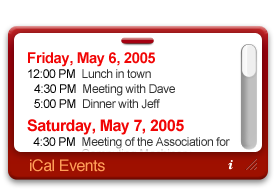
<style>
.page{position:relative;width:277px;height:190px;background:#ffffff}
.page>*{position:absolute;margin:0}
.t1{font:12px/12px "ArialMT";letter-spacing:-0.029em;color:#333333}
.t2{font:15px/15px "Arial-BoldMT";letter-spacing:-0.029em;color:#f10505}
.t3{font:12px/15px "ArialMT";letter-spacing:-0.029em;color:#000000}
.t4{font:12px/15px "ArialMT";letter-spacing:-0.029em;color:#333333}
.t5{font:16px/15px "Arial-BoldMT";letter-spacing:-0.029em;color:#f10505}
.t6{font:12px/12px "ArialMT";letter-spacing:-0.029em;color:#000000}
.t7{font:16px "Helvetica";letter-spacing:-0.029em;color:#ff9e58}
</style>
<div class="page">
<p class="t1" style="left:27px;top:52px;width:203px;height:109px"><span class="t2">Friday, May 6, 2005<br></span><span class="t3">12:00 PM  </span><span class="t4">Lunch in town<br></span><span class="t3">4:30 PM  </span><span class="t4">Meeting with Dave<br></span><span class="t3">5:00 PM  </span><span class="t4">Dinner with Jeff<br></span><span class="t5">Saturday, May 7, 2005<br></span><span class="t3">4:3</span><span class="t6">0 PM  </span>Meeting of the Association for <br>                  Computing Machinery</p>
<p class="t7" style="left:30px;top:159px;width:75px;height:13px">iCal Events</p>
</div>
